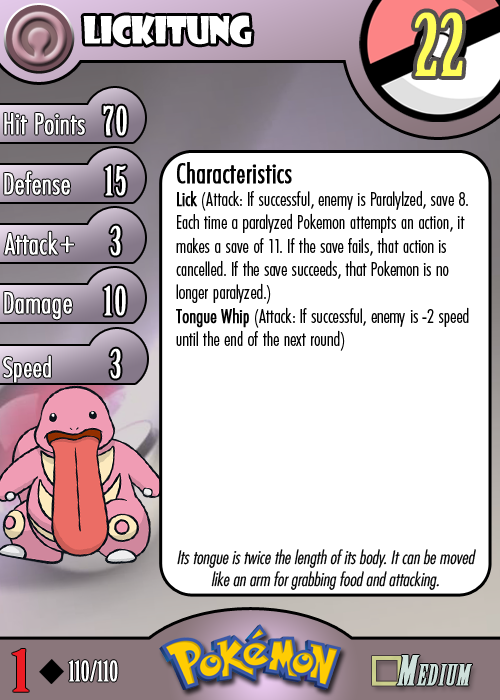
<style>
.page{position:relative;width:500px;height:700px;background:#ffffff}
.page>*{position:absolute;margin:0}
.t1{font:36.7px "ShowcardGothic-Reg";letter-spacing:-0.025em;color:#ffffff;scale:0.91 1}
.t2{font:83.3px "BirchStd";letter-spacing:0.025em;color:#fffd59;font-weight:bold}
.t3{font:27.8px "Futura-CondensedLight";color:#ffffff;font-weight:bold}
.t4{font:38.9px "BirchStd";letter-spacing:0.035em;color:#ffffff;font-weight:bold}
.t5{font:19.4px "FuturaCondensedBQ-Light";color:#010101}
.t6{font:27.8px "FuturaCondensedBQ-Light";color:#010101;font-weight:bold}
.t7{font:19.4px "FuturaCondensedBQ-Light";color:#010101;font-weight:bold}
.t8{font:30.6px "Futura-CondensedLight";color:#ffffff;font-weight:bold}
.t9{font:27.8px "FuturaCondensedBQ-Light";color:#ffffff;font-weight:bold}
.t10{font:18.1px "Futura-CondensedLight";color:#010101;font-style:italic}
.t11{font:55.6px "BirchStd";color:#ed1c24;font-weight:bold;scale:1.5 1}
.t12{font:27.8px "BirchStd";color:#ffffff;font-weight:bold}
</style>
<div class="page">
<p class="t1" style="left:83px;top:15px;width:169px;height:30px">lickitung</p>
<p class="t2" style="left:415px;top:12px;width:48px;height:64px">22</p>
<p class="t3" style="left:4px;top:113px;width:81px;height:22px">Hit Points</p>
<p class="t4" style="left:103px;top:105px;width:24px;height:31px">70</p>
<p class="t3" style="left:4px;top:171px;width:66px;height:24px">Defense</p>
<p class="t4" style="left:105px;top:165px;width:21px;height:31px">15</p>
<p class="t5" style="left:176px;top:162px;width:293px;height:189px"><span class="t6">Characteristics<br></span><span class="t7">Lick</span> (Attack: If successful, enemy is Paralylzed, save 8. Each time a paralyzed Pokemon attempts an action, it makes a save of 11. If the save fails, that action is cancelled. If the save succeeds, that Pokemon is no longer paralyzed.)<br><span class="t7">Tongue Whip</span> (Attack: If successful, enemy is -2 speed until the end of the next round)</p>
<p class="t3" style="left:4px;top:231px;width:54px;height:24px">Attack</p>
<p class="t4" style="left:110px;top:225px;width:11px;height:31px">3</p>
<p class="t8" style="left:60px;top:236px;width:14px;height:17px">+</p>
<p class="t3" style="left:4px;top:292px;width:68px;height:28px">Damage</p>
<p class="t4" style="left:104px;top:285px;width:22px;height:31px">10</p>
<p class="t4" style="left:110px;top:348px;width:11px;height:31px">3</p>
<p class="t9" style="left:3px;top:355px;width:48px;height:28px">Speed</p>
<p class="t10" style="left:177px;top:549px;width:299px;height:41px;text-align:center">Its tongue is twice the length of its body. It can be moved like an arm for grabbing food and attacking.</p>
<p class="t11" style="left:12px;top:649px;width:17px;height:43px">1</p>
<p class="t12" style="left:68px;top:660px;width:50px;height:22px">110/110</p>
</div>
